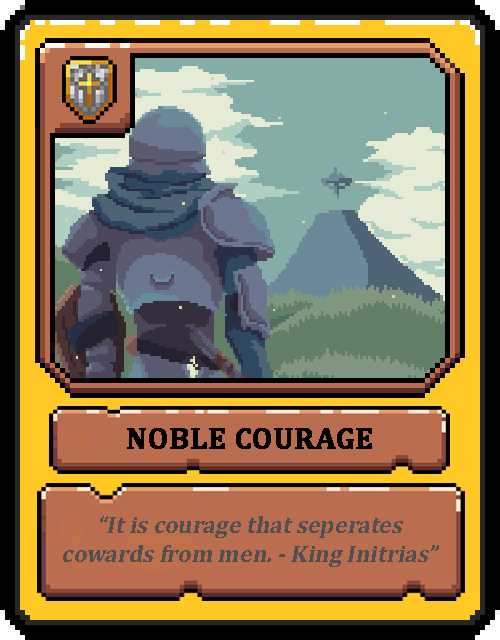
<style>
.page{position:relative;width:500px;height:640px}
.page>*{position:absolute;margin:0}
.t1{font:30px "Cambria-Bold";color:#000000;text-transform:uppercase;font-weight:bold}
.t2{font:24px "Cambria-Bold";color:#505050;font-style:italic}
</style>
<div class="page">
<p class="t1" style="left:127px;top:428px;width:245px;height:21px">Noble Courage</p>
<p class="t2" style="left:63px;top:516px;width:376px;height:51px;text-align:center">“It is courage that seperates cowards from men. - King Initrias”</p>
</div>
